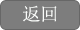
<style>
.page{position:relative;width:80px;height:30px;background:#7d7d7d}
.page>*{position:absolute;margin:0}
.t1{font:18px "SimSun";color:#fafcfa}
</style>
<div class="page">
<p class="t1" style="left:23px;top:5px;width:34px;height:17px">返回</p>
</div>
